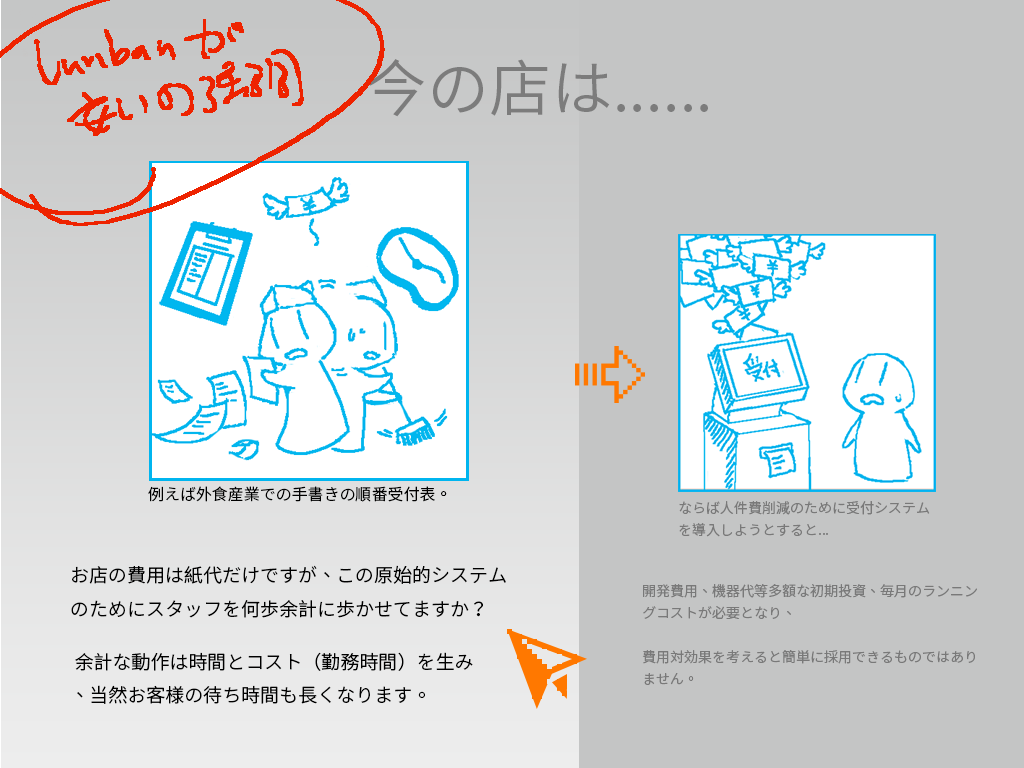
<style>
.page{position:relative;width:1024px;height:768px;background:#c4c5c5}
.page>*{position:absolute;margin:0}
.t1{font:62px "NotoSansCJKtc-DemiLight";color:#7b7b7b}
.t2{font:16px "NotoSansCJKtc-DemiLight";color:#000000}
.t3{font:14px/22px "NotoSansCJKtc-DemiLight";color:#797979}
.t4{font:19px "NotoSansCJKtc-DemiLight";color:#000000}
</style>
<div class="page">
<p class="t1" style="left:367px;top:59px;width:341px;height:58px">今の店は......</p>
<p class="t2" style="left:148px;top:486px;width:299px;height:16px">例えば外食産業での手書きの順番受付表。</p>
<p class="t3" style="left:679px;top:501px;width:251px;height:36px">ならば人件費削減のために受付システムを導入しようとすると...</p>
<p class="t4" style="left:71px;top:565px;width:435px;height:53px">お店の費用は紙代だけですが、この原始的システムのためにスタッフを何歩余計に歩かせてますか？</p>
<p class="t3" style="left:642px;top:584px;width:335px;height:101px">開発費用、機器代等多額な初期投資、毎月のランニングコストが必要となり、<br><br>費用対効果を考えると簡単に採用できるものではありません。</p>
<p class="t4" style="left:75px;top:652px;width:398px;height:52px">余計な動作は時間とコスト（勤務時間）を生み、当然お客様の待ち時間も長くなります。</p>
</div>
